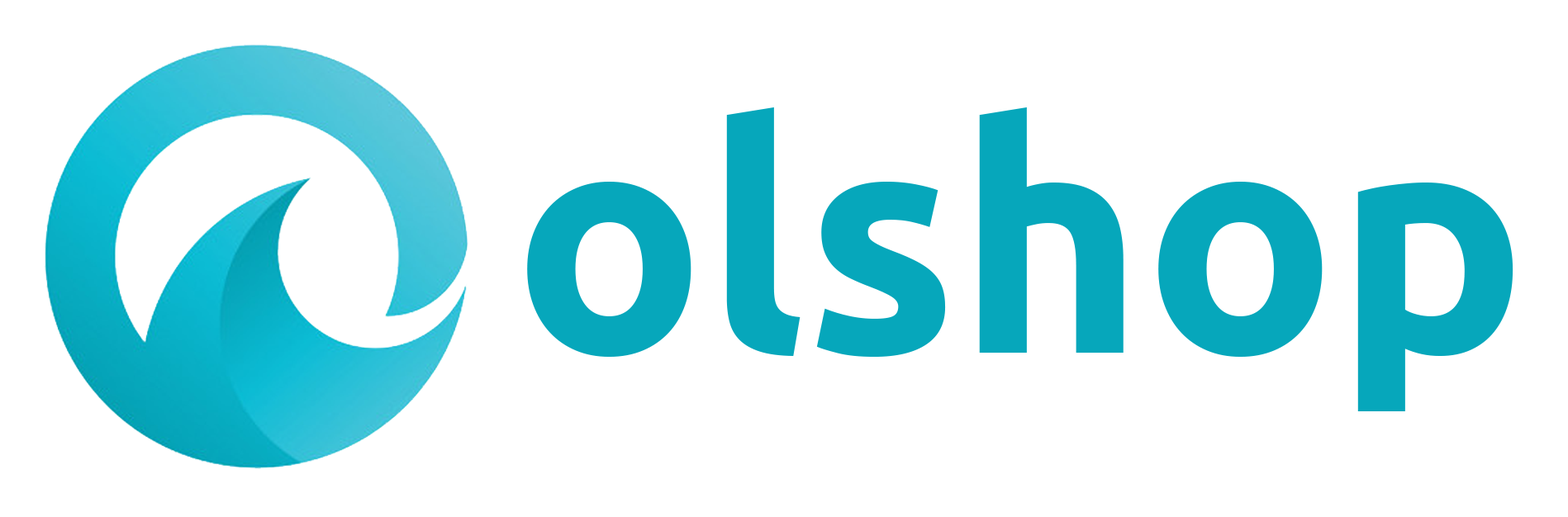
<style>
.page{position:relative;width:1568px;height:517px;background:#ffffff}
.page>*{position:absolute;margin:0}
.t1{font:316.1px "Ubuntu-Bold";color:#06a7bb}
</style>
<div class="page">
<p class="t1" style="left:527px;top:107px;width:986px;height:304px">olshop</p>
</div>
